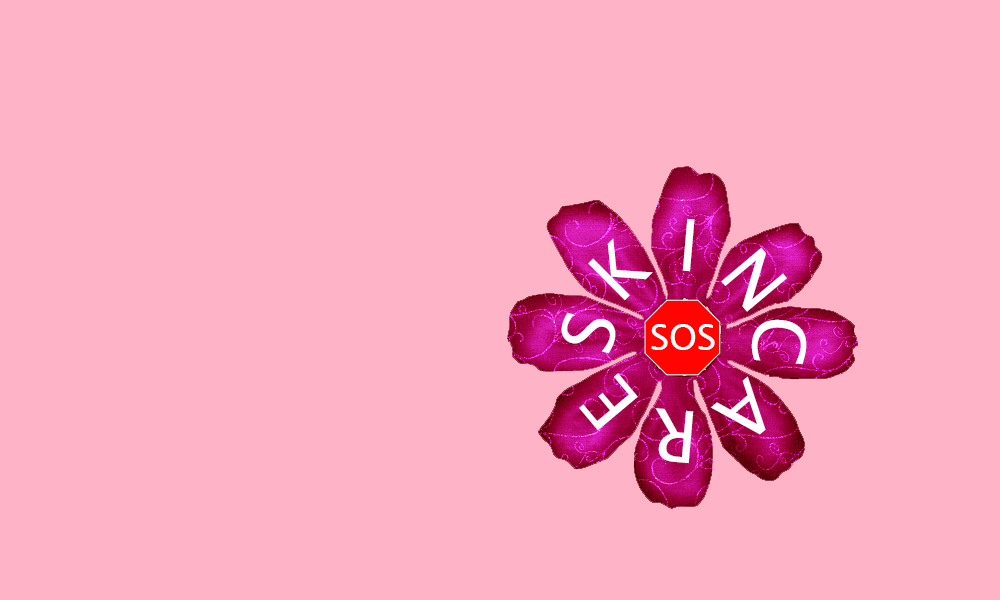
<style>
.page{position:relative;width:1000px;height:600px;background:#ffb3c6}
.page>*{position:absolute;margin:0}
.t1{font:72px "LucidaSansUnicode";color:#ffffff}
.t2{font:36px "LucidaSansUnicode";color:#ffffff}
</style>
<div class="page">
<p class="t1" style="left:682px;top:218px;width:13px;height:54px;rotate:5deg">I</p>
<p class="t1" style="left:588px;top:238px;width:65px;height:63px;rotate:-45deg">K</p>
<p class="t1" style="left:721px;top:247px;width:66px;height:65px;rotate:50deg">N</p>
<p class="t1" style="left:561px;top:312px;width:55px;height:42px;rotate:-75deg">S</p>
<p class="t2" style="left:651px;top:324px;width:64px;height:26px">SOS</p>
<p class="t1" style="left:751px;top:319px;width:56px;height:46px;rotate:95deg">C</p>
<p class="t1" style="left:579px;top:373px;width:59px;height:58px;rotate:-130deg">E</p>
<p class="t1" style="left:710px;top:376px;width:56px;height:59px;rotate:140deg">A</p>
<p class="t1" style="left:655px;top:408px;width:39px;height:56px;rotate:-175deg">R</p>
</div>
